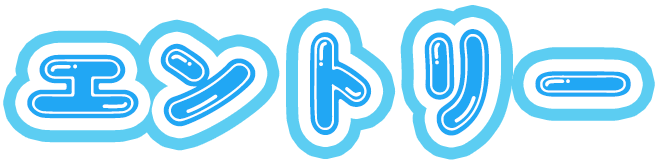
<style>
.page{position:relative;width:658px;height:164px;background:#ffffff}
.page>*{position:absolute;margin:0}
.t1{font:125px "DokiDokiFantasia";color:#21a7f4}
</style>
<div class="page">
<p class="t1" style="left:27px;top:29px;width:604px;height:107px">エントリー</p>
</div>
